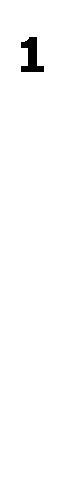
<style>
.page{position:relative;width:64px;height:500px;background:#ffffff}
.page>*{position:absolute;margin:0}
.t1{font:48px "Verdana-Bold";color:#000000}
</style>
<div class="page">
<p class="t1" style="left:21px;top:37px;width:23px;height:35px">1</p>
</div>
